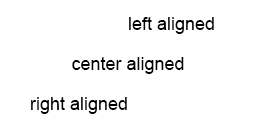
<style>
.page{position:relative;width:256px;height:128px;background:#ffffff}
.page>*{position:absolute;margin:0}
.t1{font:18px "ArialMT";color:#000000}
</style>
<div class="page">
<p class="t1" style="left:129px;top:17px;width:85px;height:17px">left aligned</p>
<p class="t1" style="left:72px;top:57px;width:112px;height:17px">center aligned</p>
<p class="t1" style="left:31px;top:97px;width:96px;height:17px">right aligned</p>
</div>
